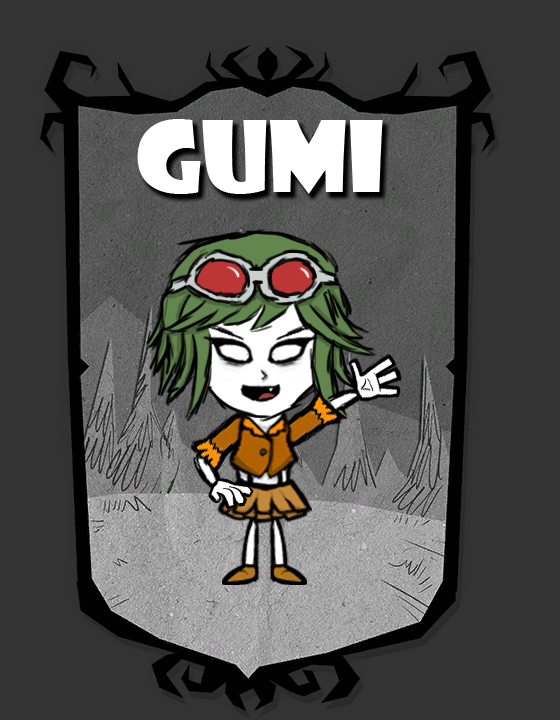
<style>
.page{position:relative;width:560px;height:720px;background:#333333}
.page>*{position:absolute;margin:0}
.t1{font:95.6px "ShowcardGothic-Reg";color:#ffffff}
</style>
<div class="page">
<p class="t1" style="left:137px;top:119px;width:246px;height:75px">GUMI</p>
</div>
